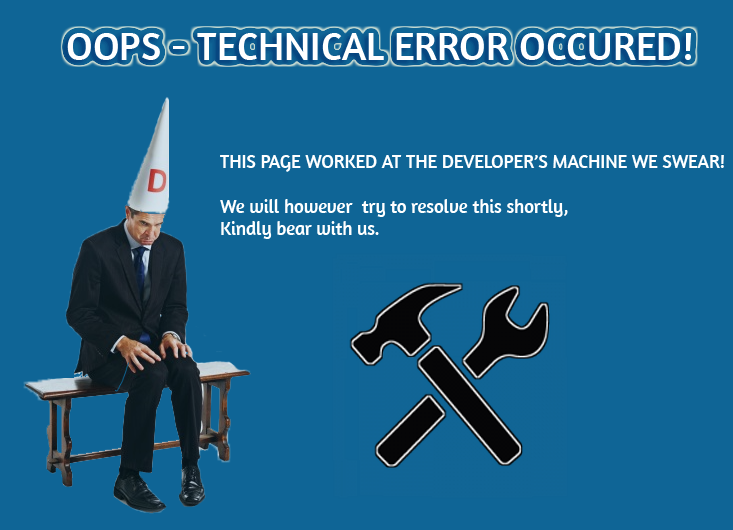
<style>
.page{position:relative;width:733px;height:530px;background:#0f6596}
.page>*{position:absolute;margin:0}
.t1{font:40px "Amaranth";color:#ffffff}
.t2{font:18.7px "Amaranth";color:#ffffff}
</style>
<div class="page">
<p class="t1" style="left:67px;top:33px;width:625px;height:27px">OOPS - TECHNICAL ERROR OCCURED!</p>
<p class="t2" style="left:220px;top:155px;width:504px;height:84px">THIS PAGE WORKED AT THE DEVELOPER’S MACHINE WE SWEAR!<br><br>We will however  try to resolve this shortly,<br>Kindly bear with us.</p>
</div>
